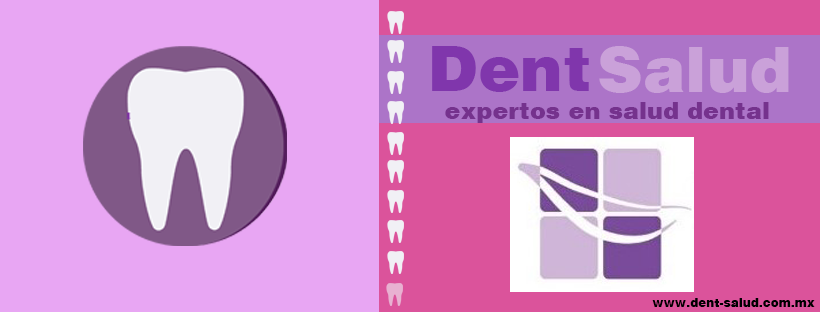
<style>
.page{position:relative;width:820px;height:312px;background:#e8a6f3}
.page>*{position:absolute;margin:0}
.t1{font:64px "Helvetica-Black";color:#8036ac}
.t2{font:64px "Helvetica-Black";color:#caa1d9}
.t3{font:24px "Helvetica-Black";color:#75328d}
.t4{font:12px "Helvetica-Black";color:#000000}
</style>
<div class="page">
<p class="t1" style="left:432px;top:46px;width:157px;height:46px">Dent</p>
<p class="t2" style="left:599px;top:46px;width:190px;height:47px">Salud</p>
<p class="t3" style="left:445px;top:102px;width:324px;height:21px">expertos en salud dental</p>
<p class="t4" style="left:652px;top:298px;width:163px;height:9px">www.dent-salud.com.mx</p>
</div>
